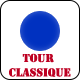
<style>
.page{position:relative;width:80px;height:80px;background:#ffffff}
.page>*{position:absolute;margin:0}
.t1{font:12px "Stencil";color:#bd0022}
</style>
<div class="page">
<p class="t1" style="left:9px;top:53px;width:62px;height:24px;text-align:center">Tour <br>classique</p>
</div>
